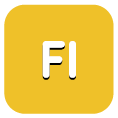
<style>
.page{position:relative;width:118px;height:118px;background:#efc129}
.page>*{position:absolute;margin:0}
.t1{font:56px "Torus-SemiBold";letter-spacing:-0.03em;color:#ffffff}
</style>
<div class="page">
<p class="t1" style="left:42px;top:41px;width:34px;height:37px">FI</p>
</div>
